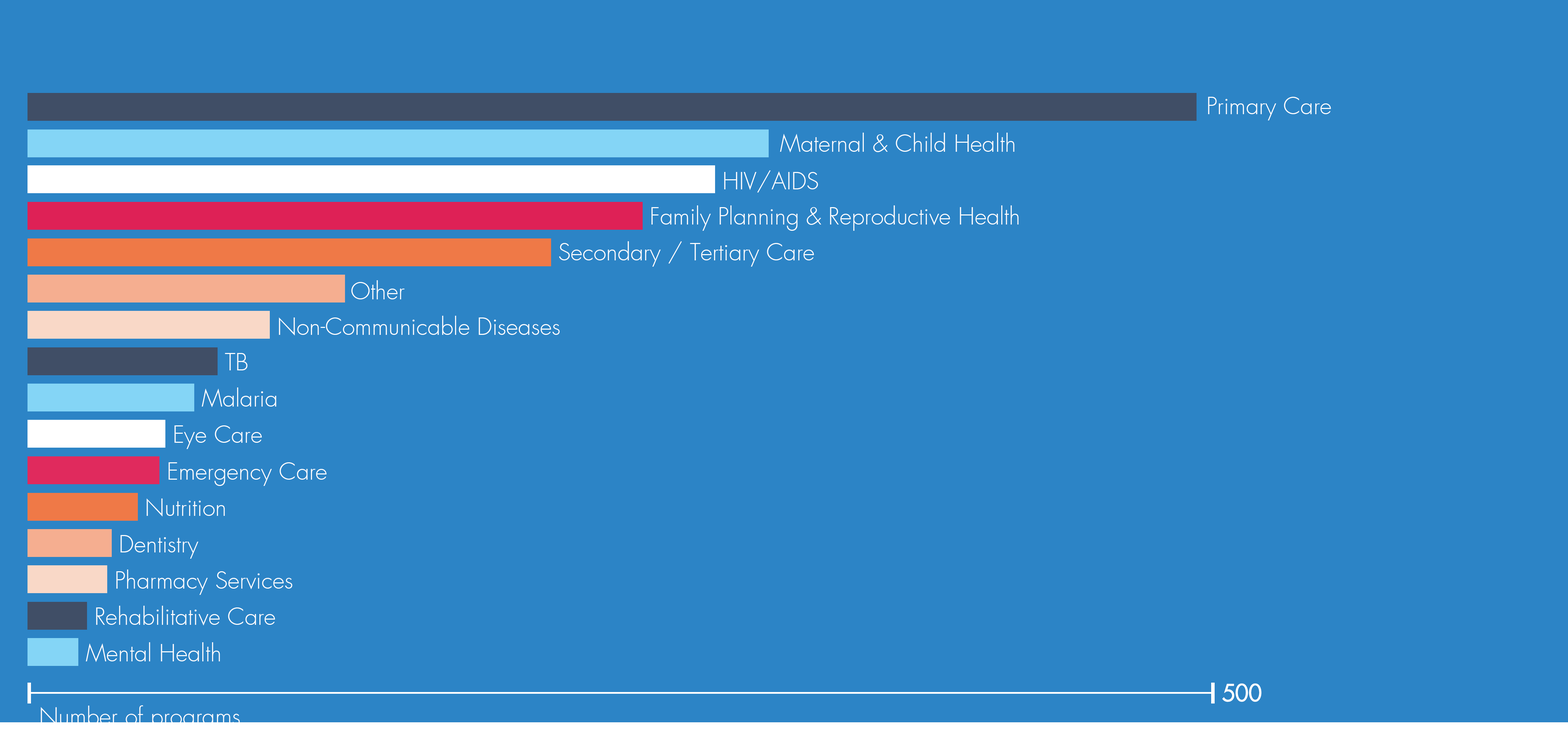
<style>
.page{position:relative;width:1568px;height:731px;background:#2c84c6}
.page>*{position:absolute;margin:0}
.t1{font:23.2px "FuturaLight";color:#ffffff}
.t2{font:23.2px "FuturaExtended";color:#ffffff}
</style>
<div class="page">
<p class="t1" style="left:1208px;top:97px;width:123px;height:23px">Primary Care</p>
<p class="t1" style="left:780px;top:133px;width:234px;height:19px">Maternal &amp; Child Health</p>
<p class="t1" style="left:724px;top:170px;width:94px;height:23px">HIV/AIDS</p>
<p class="t1" style="left:651px;top:205px;width:368px;height:26px">Family Planning &amp; Reproductive Health</p>
<p class="t1" style="left:559px;top:241px;width:255px;height:26px">Secondary / Tertiary Care</p>
<p class="t1" style="left:351px;top:280px;width:54px;height:19px">Other</p>
<p class="t1" style="left:279px;top:316px;width:281px;height:20px">Non-Communicable Diseases</p>
<p class="t1" style="left:225px;top:353px;width:23px;height:17px">TB</p>
<p class="t1" style="left:202px;top:387px;width:74px;height:20px">Malaria</p>
<p class="t1" style="left:174px;top:425px;width:88px;height:24px">Eye Care</p>
<p class="t1" style="left:168px;top:462px;width:159px;height:24px">Emergency Care</p>
<p class="t1" style="left:147px;top:499px;width:78px;height:18px">Nutrition</p>
<p class="t1" style="left:120px;top:535px;width:78px;height:24px">Dentistry</p>
<p class="t1" style="left:116px;top:570px;width:176px;height:25px">Pharmacy Services</p>
<p class="t1" style="left:96px;top:606px;width:179px;height:20px">Rehabilitative Care</p>
<p class="t1" style="left:86px;top:642px;width:134px;height:20px">Mental Health</p>
<p class="t2" style="left:1222px;top:683px;width:40px;height:19px"><span class="t1"> </span>500</p>
<p class="t1" style="left:41px;top:705px;width:199px;height:26px">Number of programs</p>
</div>
